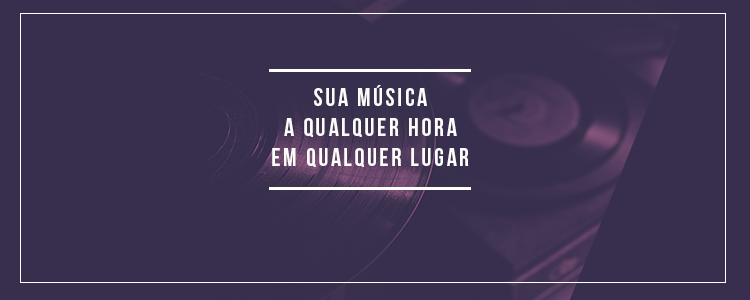
<style>
.page{position:relative;width:750px;height:300px;background:#372f4d}
.page>*{position:absolute;margin:0}
.t1{font:25.2px "BebasNeue";letter-spacing:0.1em;color:#fcfcfa}
</style>
<div class="page">
<p class="t1" style="left:272px;top:85px;width:197px;height:82px;text-align:center">sua música<br>a qualquer hora<br>em qualquer lugar</p>
</div>
